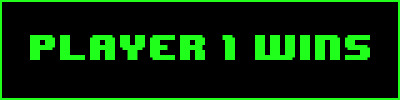
<style>
.page{position:relative;width:400px;height:100px;background:#000000}
.page>*{position:absolute;margin:0}
.t1{font:30px "8BITWONDERNominal";color:#1fff1b}
</style>
<div class="page">
<p class="t1" style="left:30px;top:35px;width:340px;height:25px">Player 1 wins</p>
</div>
